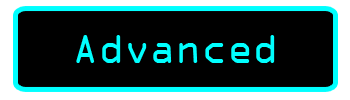
<style>
.page{position:relative;width:350px;height:100px;background:#000000}
.page>*{position:absolute;margin:0}
.t1{font:42.7px "OCRAExtended";color:#00ffff}
</style>
<div class="page">
<p class="t1" style="left:76px;top:35px;width:199px;height:28px">Advanced</p>
</div>
